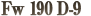
<style>
.page{position:relative;width:91px;height:16px;background:#ffffff}
.page>*{position:absolute;margin:0}
.t1{font:18px "RyuminPro-ExBold";letter-spacing:-0.06em;color:#4a3f32;font-weight:bold;scale:0.9 1}
</style>
<div class="page">
<p class="t1" style="left:1px;top:1px;width:80px;height:15px">Fw 190 D-9</p>
</div>
